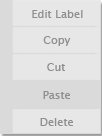
<style>
.page{position:relative;width:102px;height:136px;background:#e7e7e7}
.page>*{position:absolute;margin:0}
.t1{font:11px "LucidaSansUnicode";color:#8f8f8f}
</style>
<div class="page">
<p class="t1" style="left:32px;top:10px;width:51px;height:8px">Edit Label</p>
<p class="t1" style="left:43px;top:36px;width:28px;height:10px">Copy</p>
<p class="t1" style="left:47px;top:63px;width:18px;height:8px">Cut</p>
<p class="t1" style="left:43px;top:91px;width:27px;height:8px">Paste</p>
<p class="t1" style="left:40px;top:118px;width:33px;height:8px">Delete</p>
</div>
